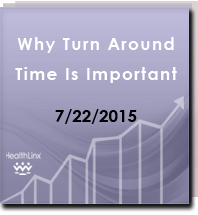
<style>
.page{position:relative;width:198px;height:215px}
.page>*{position:absolute;margin:0}
.t1{font:17px/30px "CenturyGothic-Bold";letter-spacing:0.08em;color:#ffffff}
.t2{font:17px "CenturyGothic-Bold";color:#000000}
</style>
<div class="page">
<p class="t1" style="left:15px;top:37px;width:162px;height:46px;text-align:center">Why Turn Around<br>Time Is Important</p>
<p class="t2" style="left:55px;top:109px;width:82px;height:15px">7/22/2015</p>
</div>
